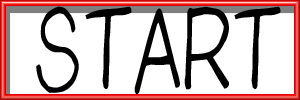
<style>
.page{position:relative;width:300px;height:100px;background:#ffffff}
.page>*{position:absolute;margin:0}
.t1{font:99.6px "mikachan";color:#000000}
</style>
<div class="page">
<p class="t1" style="left:36px;top:6px;width:245px;height:88px">START</p>
</div>
